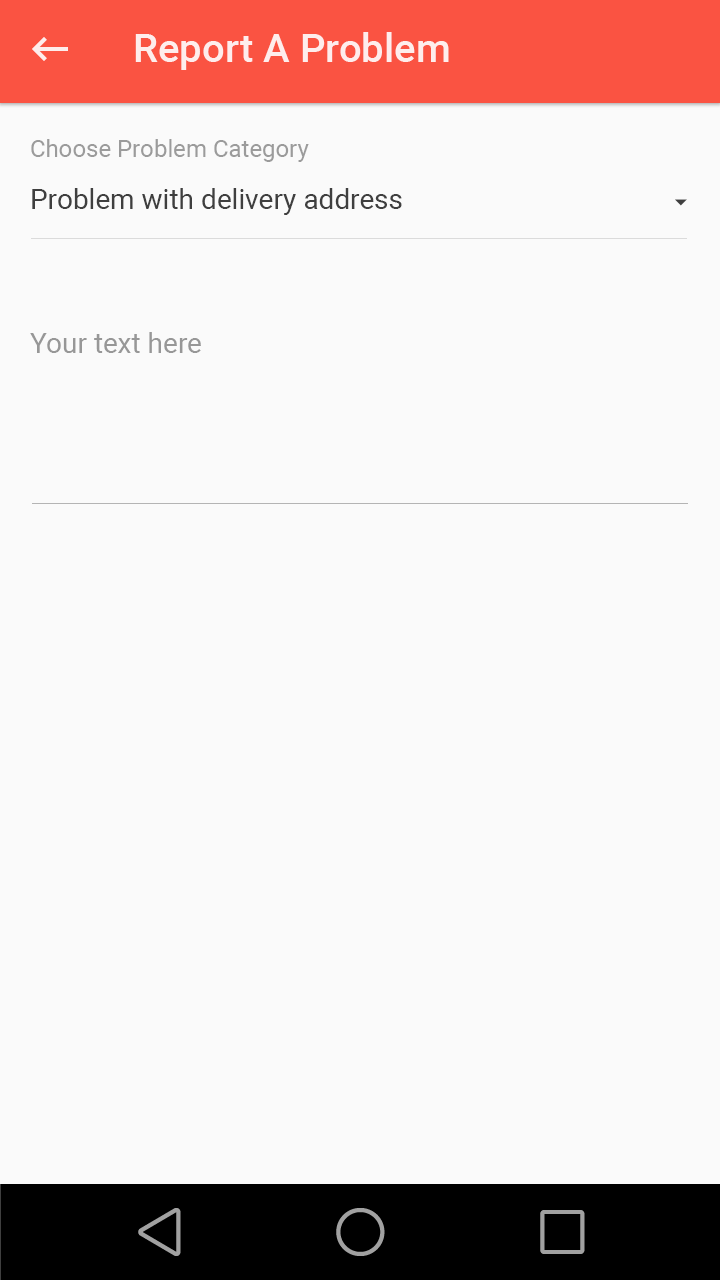
<style>
.page{position:relative;width:720px;height:1280px;background:#fafafa}
.page>*{position:absolute;margin:0}
.t1{font:40px "Roboto-Medium";color:#ffffff}
.t2{font:24px "Roboto-Regular";color:#9b9b9b}
.t3{font:28px "Roboto-Regular";color:#3f3f3f}
.t4{font:28px "Roboto-Regular";color:#979797}
</style>
<div class="page">
<p class="t1" style="left:135px;top:32px;width:314px;height:38px;opacity:0.87">Report A Problem</p>
<p class="t2" style="left:31px;top:139px;width:278px;height:23px">Choose Problem Category</p>
<p class="t3" style="left:32px;top:188px;width:370px;height:27px">Problem with delivery address</p>
<p class="t4" style="left:30px;top:332px;width:171px;height:21px">Your text here</p>
</div>
